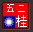
<style>
.page{position:relative;width:33px;height:32px;background:#f20000}
.page>*{position:absolute;margin:0}
.t1{font:10.4px "SimSun";color:#ffffff}
.t2{font:11.7px "SimSun";color:#ffffff}
</style>
<div class="page">
<p class="t1" style="left:7px;top:4px;width:18px;height:8px">五二</p>
<p class="t2" style="left:16px;top:15px;width:11px;height:12px">桂</p>
</div>
